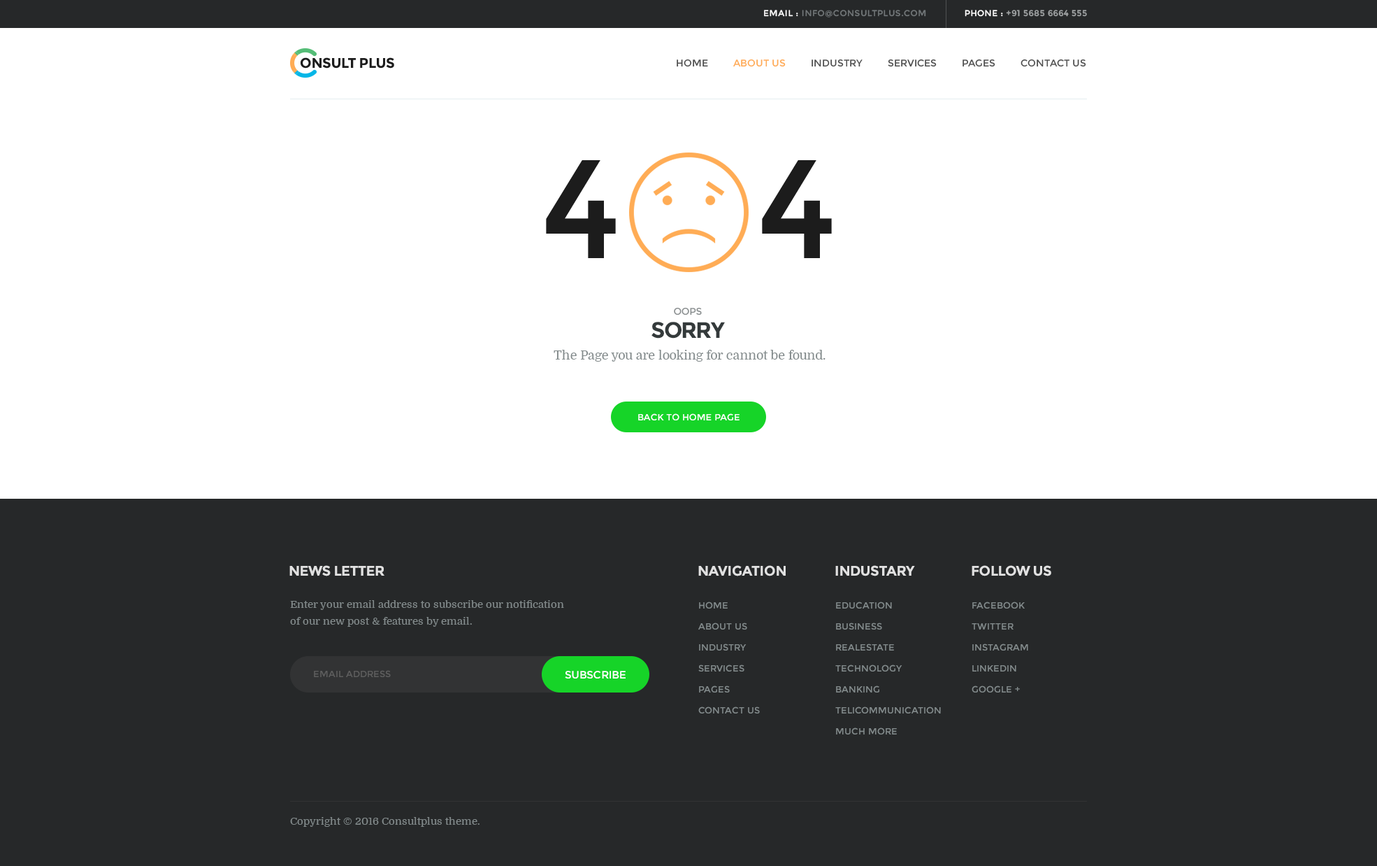
<style>
.page{position:relative;width:1377px;height:866px;background:#ffffff}
.page>*{position:absolute;margin:0}
.t1{font:8.4px "Montserrat-Regular";letter-spacing:0.05em;color:#727779;text-transform:uppercase}
.t2{font:8.4px "Montserrat-Regular";letter-spacing:0.05em;color:#ffffff;text-transform:uppercase}
.t3{font:8.4px "Montserrat-Regular";letter-spacing:0.05em;color:#a2a5a6;text-transform:uppercase}
.t4{font:9.8px "Montserrat-Regular";color:#4e4e4e;text-transform:uppercase}
.t5{font:9.8px "Montserrat-Regular";color:#ffac55;text-transform:uppercase}
.t6{font:139.8px "Montserrat-Regular";letter-spacing:-0.025em;color:#1c1c1c;text-transform:uppercase}
.t7{font:22.4px/23.1px "Montserrat-Bold";letter-spacing:-0.05em;color:#343a3b;text-transform:uppercase}
.t8{font:9.8px/23.1px "Montserrat-Regular";letter-spacing:-0.05em;color:#898e8f;text-transform:uppercase}
.t9{font:12.6px "Domine-Regular";letter-spacing:-0.01em;color:#838b8c}
.t10{font:9.1px "Montserrat-Regular";letter-spacing:-0.01em;color:#ffffff;text-transform:uppercase}
.t11{font:14px "Montserrat-Bold";letter-spacing:-0.025em;color:#e1e1e1;text-transform:uppercase}
.t12{font:10.5px/16.8px "Domine-Regular";color:#838b8c}
.t13{font:9.1px/21px "Montserrat-Regular";color:#838b8c;text-transform:uppercase}
.t14{font:9.1px "Montserrat-Regular";color:#5e5e5e;text-transform:uppercase}
.t15{font:10.7px "Montserrat-Regular";letter-spacing:-0.01em;color:#ffffff;text-transform:uppercase}
.t16{font:10.5px "Domine-Regular";color:#838b8c}
</style>
<div class="page">
<p class="t1" style="left:764px;top:10px;width:323px;height:7px"><span class="t2">Email : </span>info@consultplus.com               <span class="t2">Phone :</span><span class="t3"> +91 5685 6664 555</span></p>
<p class="t4" style="left:677px;top:59px;width:410px;height:8px">Home         <span class="t5">about us</span>         industry         services         pages         Contact us</p>
<p class="t6" style="left:546px;top:160px;width:286px;height:98px">4    4</p>
<p class="t7" style="left:652px;top:308px;width:74px;height:30px;text-align:center"><span class="t8">Oops<br></span>sorry</p>
<p class="t9" style="left:554px;top:350px;width:272px;height:12px">The Page you are looking for cannot be found.</p>
<p class="t10" style="left:638px;top:413px;width:102px;height:7px">Back to home page</p>
<p class="t11" style="left:289px;top:565px;width:96px;height:11px">News letter</p>
<p class="t11" style="left:699px;top:565px;width:87px;height:11px">navigation</p>
<p class="t11" style="left:836px;top:565px;width:79px;height:11px">Industary</p>
<p class="t11" style="left:972px;top:565px;width:80px;height:11px">Follow us</p>
<p class="t12" style="left:290px;top:600px;width:274px;height:27px">Enter your email address to subscribe our notification<br>of our new post &amp; features by email.</p>
<p class="t13" style="left:699px;top:601px;width:61px;height:112px">Home <br>about us <br>industry <br>services <br>pages <br>Contact us</p>
<p class="t13" style="left:836px;top:601px;width:105px;height:133px">Education<br>business<br>realestate<br>technology<br>banking<br>telicommunication<br>much more</p>
<p class="t13" style="left:972px;top:601px;width:57px;height:91px">Facebook<br>twitter<br>instagram<br>linkedin<br>google +</p>
<p class="t14" style="left:314px;top:670px;width:77px;height:7px">Email Address</p>
<p class="t15" style="left:565px;top:671px;width:61px;height:7px">Subscribe</p>
<p class="t16" style="left:290px;top:817px;width:190px;height:9px">Copyright © 2016 Consultplus theme.</p>
</div>
